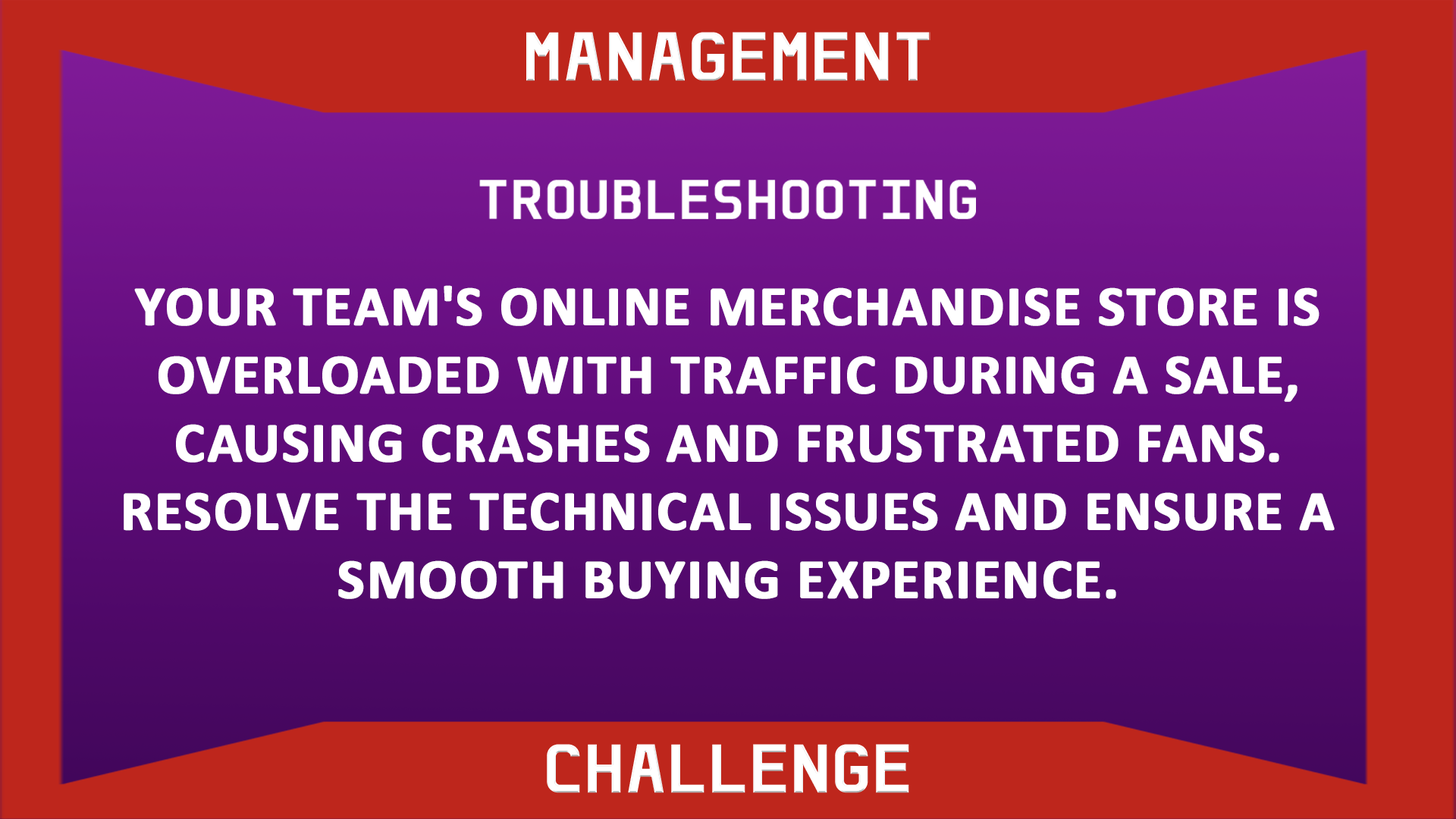
<style>
.page{position:relative;width:1456px;height:819px;background:#be261c}
.page>*{position:absolute;margin:0}
.t1{font:69.5px "AberMono-Bold";letter-spacing:-0.01em;color:#ffffff;text-transform:uppercase;font-weight:bold}
.t2{font:56.4px "AberMono-Bold";letter-spacing:-0.01em;color:#ffffff;text-transform:uppercase;font-weight:bold}
.t3{font:56.9px "Calibri-Bold";letter-spacing:-0.01em;color:#ffffff;text-transform:uppercase;font-weight:bold}
</style>
<div class="page">
<p class="t1" style="left:526px;top:32px;width:404px;height:49px">MANAGEMENT</p>
<p class="t2" style="left:479px;top:180px;width:497px;height:39px">TROUBLESHOOTING</p>
<p class="t3" style="left:124px;top:285px;width:1211px;height:314px;text-align:center">Your team's online merchandise store is overloaded with traffic during a sale, causing crashes and frustrated fans. Resolve the technical issues and ensure a smooth buying experience.</p>
<p class="t1" style="left:547px;top:744px;width:362px;height:49px">CHALLENGE</p>
</div>
